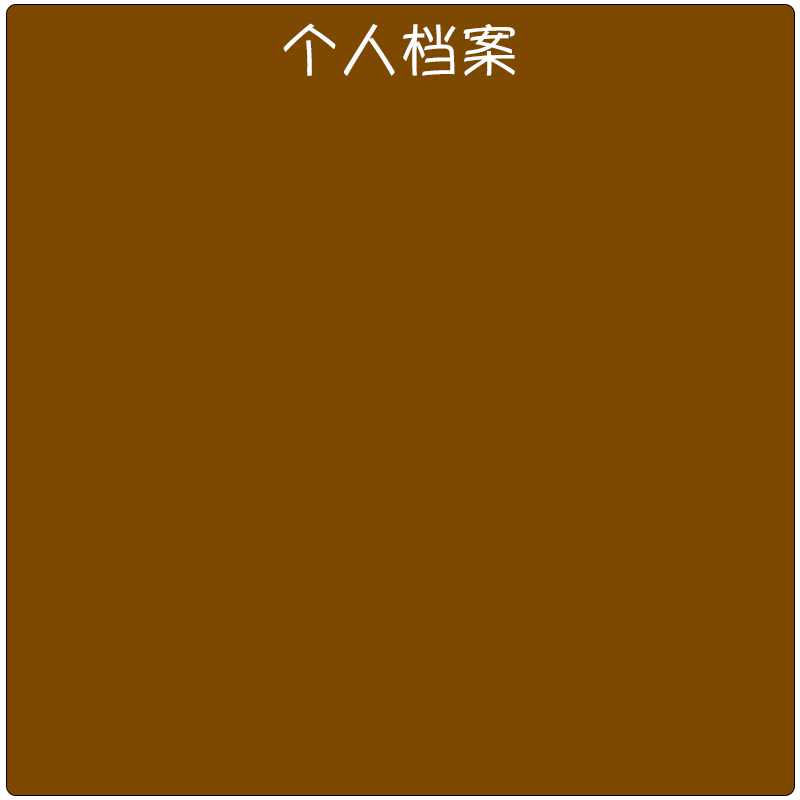
<style>
.page{position:relative;width:800px;height:800px;background:#7d4900}
.page>*{position:absolute;margin:0}
.t1{font:60px "YuppyTC-Regular";color:#ffffff}
</style>
<div class="page">
<p class="t1" style="left:283px;top:23px;width:232px;height:53px">个人档案</p>
</div>
